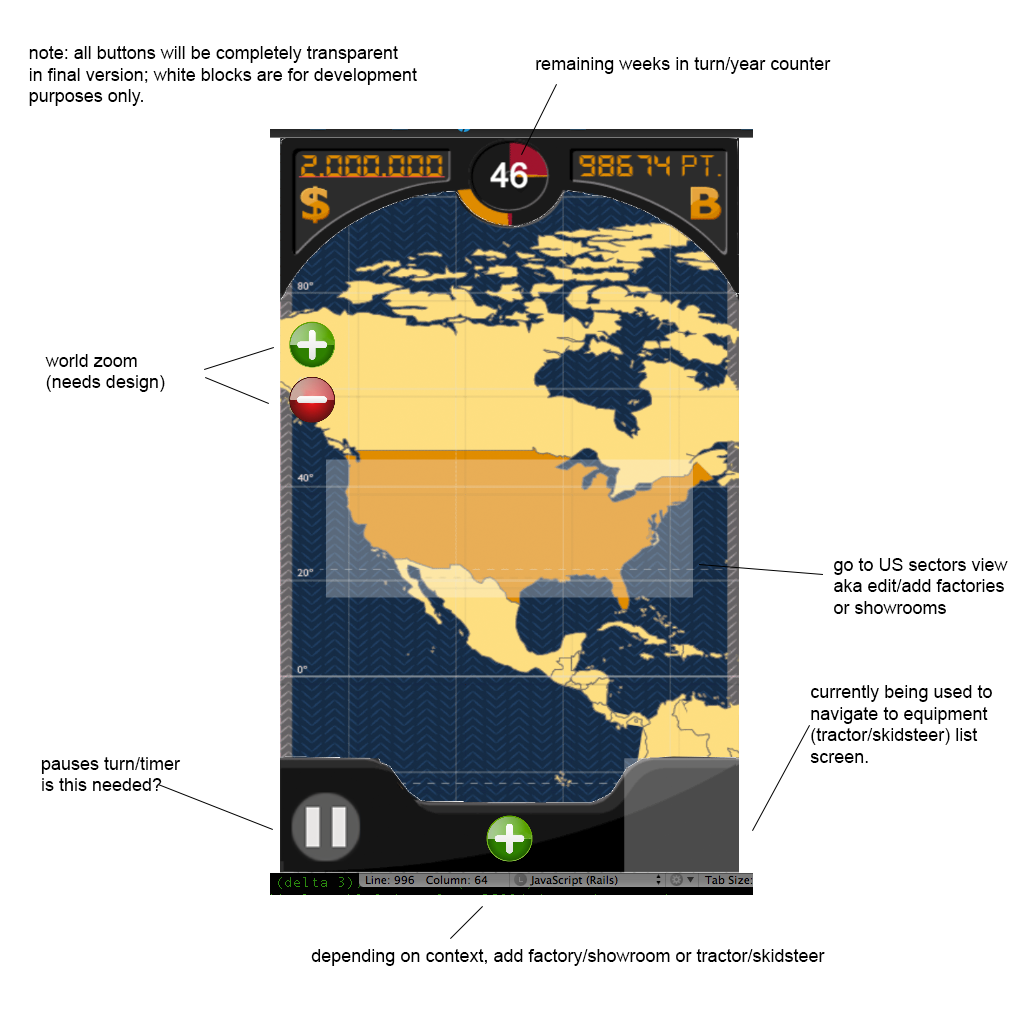
<style>
.page{position:relative;width:1024px;height:1024px;background:#ffffff}
.page>*{position:absolute;margin:0}
.t1{font:18px "ArialMT";color:#000000}
</style>
<div class="page">
<p class="t1" style="left:29px;top:46px;width:388px;height:60px">note: all buttons will be completely transparent<br>in final version; white blocks are for development<br>purposes only.</p>
<p class="t1" style="left:536px;top:57px;width:295px;height:17px">remaining weeks in turn/year counter</p>
<p class="t1" style="left:45px;top:354px;width:120px;height:38px">world zoom <br>(needs design)</p>
<p class="t1" style="left:834px;top:558px;width:174px;height:56px">go to US sectors view<br>aka edit/add factories<br>or showrooms</p>
<p class="t1" style="left:810px;top:685px;width:182px;height:78px">currently being used to<br>navigate to equipment <br>(tractor/skidsteer) list<br>screen.</p>
<p class="t1" style="left:41px;top:757px;width:140px;height:34px">pauses turn/timer<br>is this needed?</p>
<p class="t1" style="left:311px;top:949px;width:514px;height:17px">depending on context, add factory/showroom or tractor/skidsteer</p>
</div>
